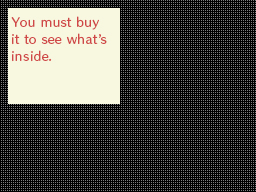
<style>
.page{position:relative;width:256px;height:192px;background:#000000}
.page>*{position:absolute;margin:0}
.t1{font:11.4px/17px "HummingStd-D";letter-spacing:0.04em;color:#d04848}
.t2{font:11.4px/17px "HummingStd-D";letter-spacing:0.075em;color:#d04848}
</style>
<div class="page">
<p class="t1" style="left:11px;top:16px;width:96px;height:46px">You must buy<br>it to see what’s<br>in<span class="t2">s</span>ide.</p>
</div>
